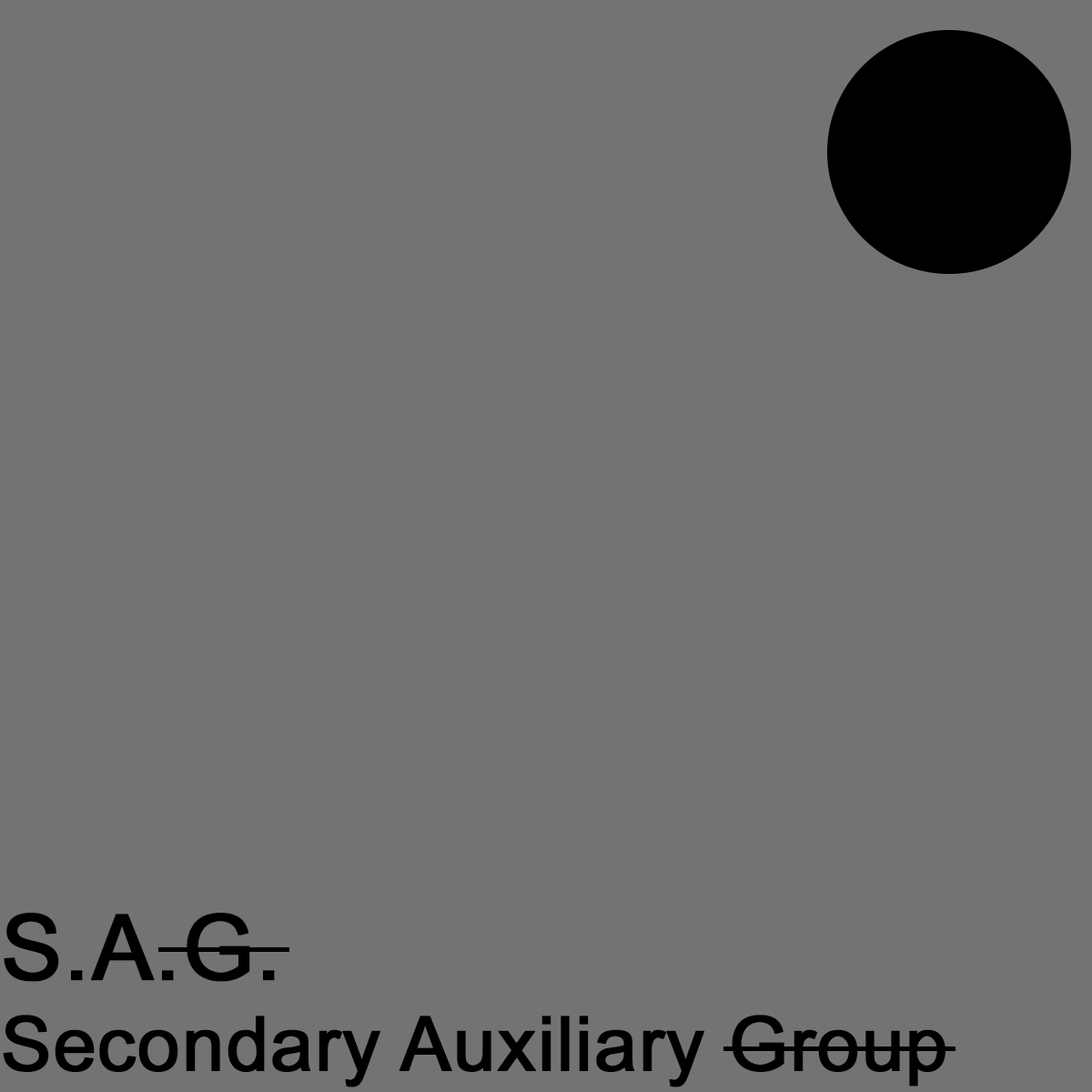
<style>
.page{position:relative;width:1092px;height:1092px;background:#737373}
.page>*{position:absolute;margin:0}
.t1{font:75.8px "ArialMT";color:#000000;font-weight:bold}
.t2{font:91px "ArialMT";color:#000000;font-weight:bold}
</style>
<div class="page">
<p class="t1" style="left:3px;top:913px;width:942px;height:174px"><span class="t2">S.A.G.<br></span>Secondary Auxiliary Group</p>
</div>
